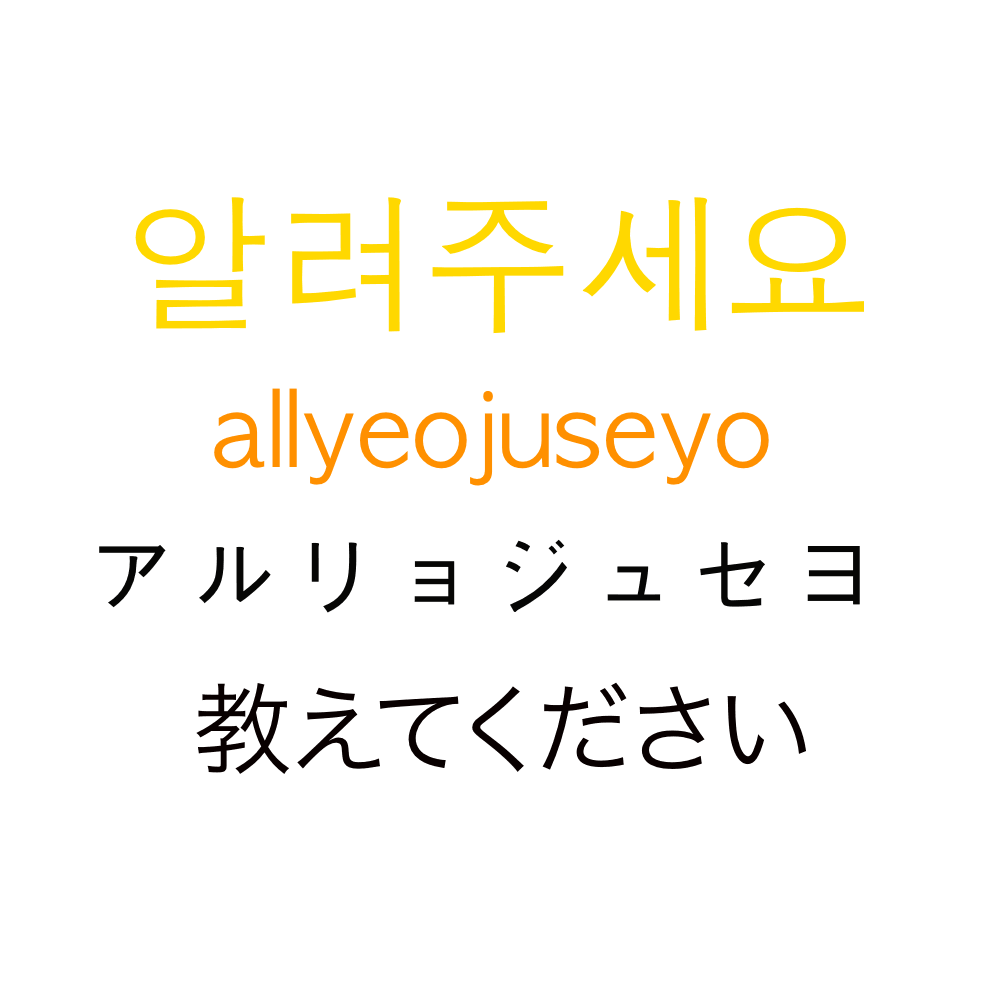
<style>
.page{position:relative;width:1000px;height:1000px;background:#ffffff}
.page>*{position:absolute;margin:0}
.t1{font:150px "AppleGothic";color:#ffd800}
.t2{font:100px "AppleGothic";color:#ff9000}
.t3{font:100px "AppleGothic";color:#060605}
.t4{font:100px "HiraKakuProN-W3";color:#080000}
</style>
<div class="page">
<p class="t1" style="left:135px;top:197px;width:729px;height:137px">알려주세요</p>
<p class="t2" style="left:214px;top:388px;width:555px;height:98px">allyeojuseyo</p>
<p class="t3" style="left:99px;top:539px;width:761px;height:74px">アルリョジュセヨ</p>
<p class="t4" style="left:196px;top:682px;width:610px;height:92px">教えてください</p>
</div>
